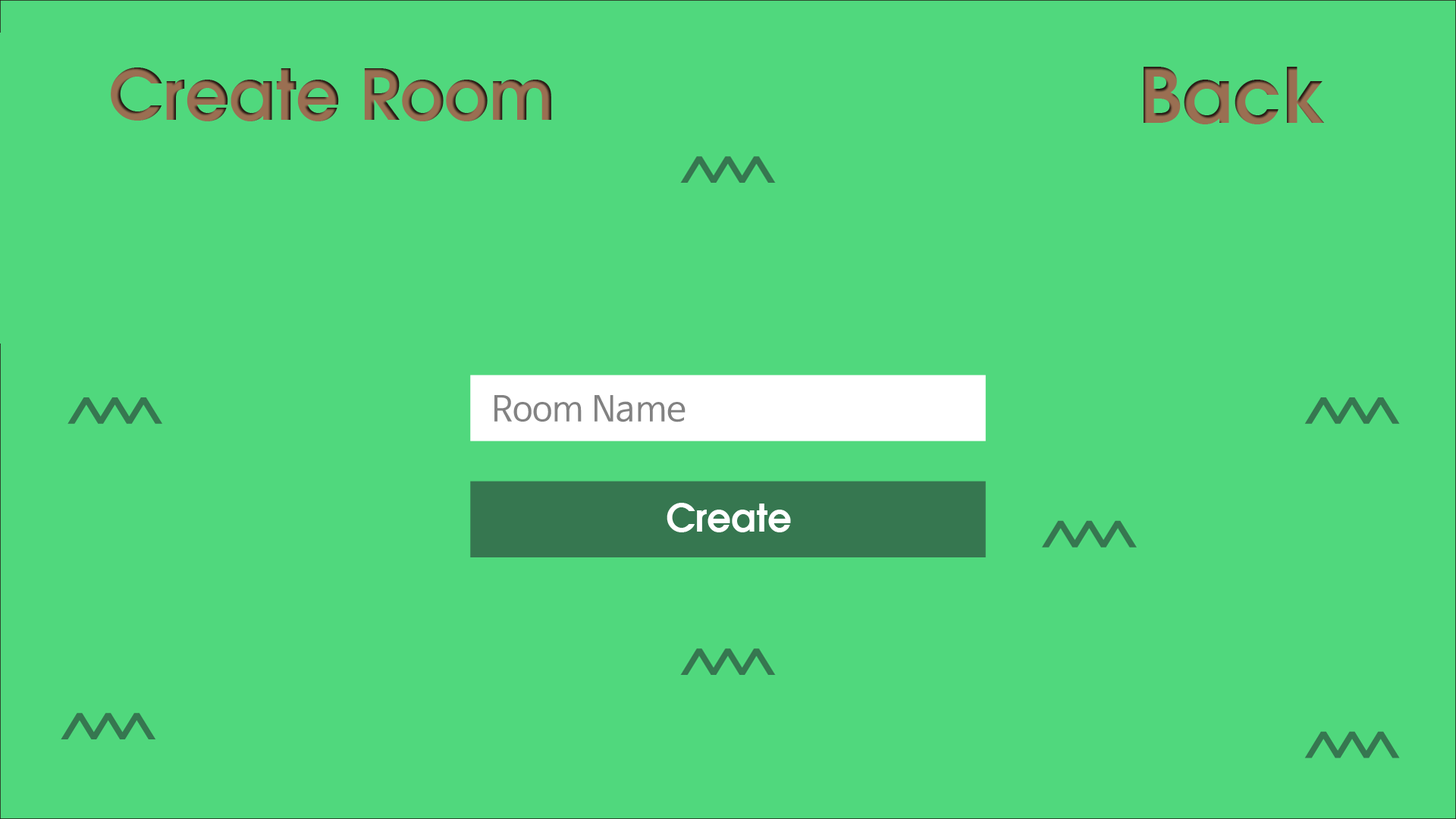
<style>
.page{position:relative;width:1456px;height:819px;background:#50d87d}
.page>*{position:absolute;margin:0}
.t1{font:69.5px "AvantGarde-Demi";color:#9a6f52}
.t2{font:34.8px "NanumBarunGothicOTF";color:#828282}
.t3{font:37.9px "AvantGarde-Demi";color:#ffffff}
</style>
<div class="page">
<p class="t1" style="left:111px;top:67px;width:440px;height:54px">Create Room</p>
<p class="t2" style="left:494px;top:395px;width:192px;height:27px">Room Name</p>
<p class="t3" style="left:667px;top:503px;width:124px;height:29px">Create</p>
</div>
